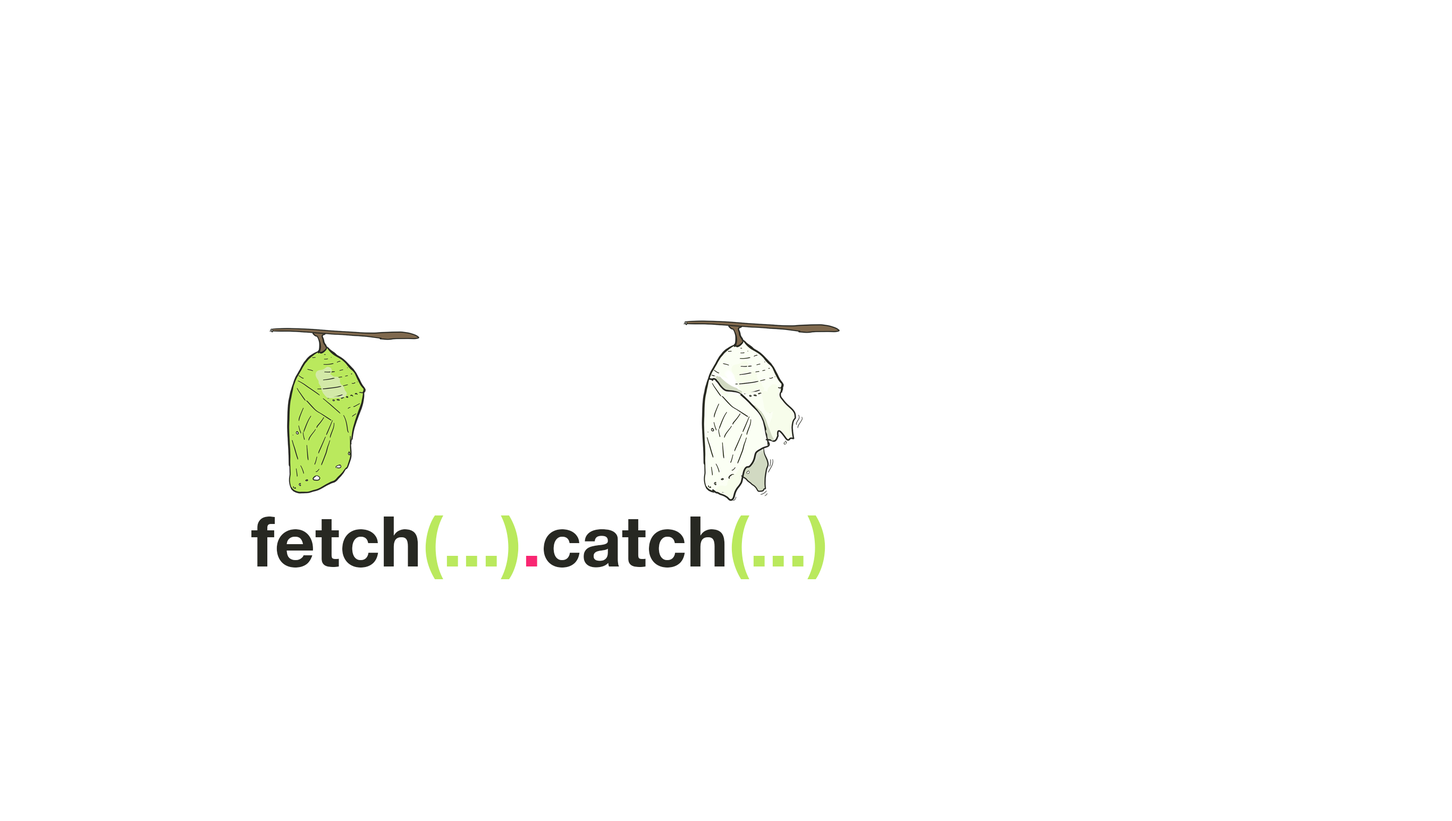
<style>
.page{position:relative;width:1452px;height:821px;background:#ffffff}
.page>*{position:absolute;margin:0}
.t1{font:70.2px "HelveticaNeue-Bold";color:#272822}
.t2{font:70.2px "HelveticaNeue-Bold";color:#bae95d}
.t3{font:70.2px "HelveticaNeue-Bold";color:#f92672}
</style>
<div class="page">
<p class="t1" style="left:251px;top:516px;width:574px;height:63px">fetch<span class="t2">(...)</span><span class="t3">.</span>catch<span class="t2">(...)</span></p>
</div>
